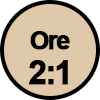
<style>
.page{position:relative;width:100px;height:100px;background:#e0c8aa}
.page>*{position:absolute;margin:0}
.t1{font:25px "Arial-BoldMT";letter-spacing:-0.08em;color:#000000;font-weight:bold}
.t2{font:33.3px "Arial-BoldMT";letter-spacing:-0.08em;color:#000000;font-weight:bold}
</style>
<div class="page">
<p class="t1" style="left:30px;top:31px;width:40px;height:19px">Ore</p>
<p class="t2" style="left:29px;top:60px;width:39px;height:25px">2:1</p>
</div>
